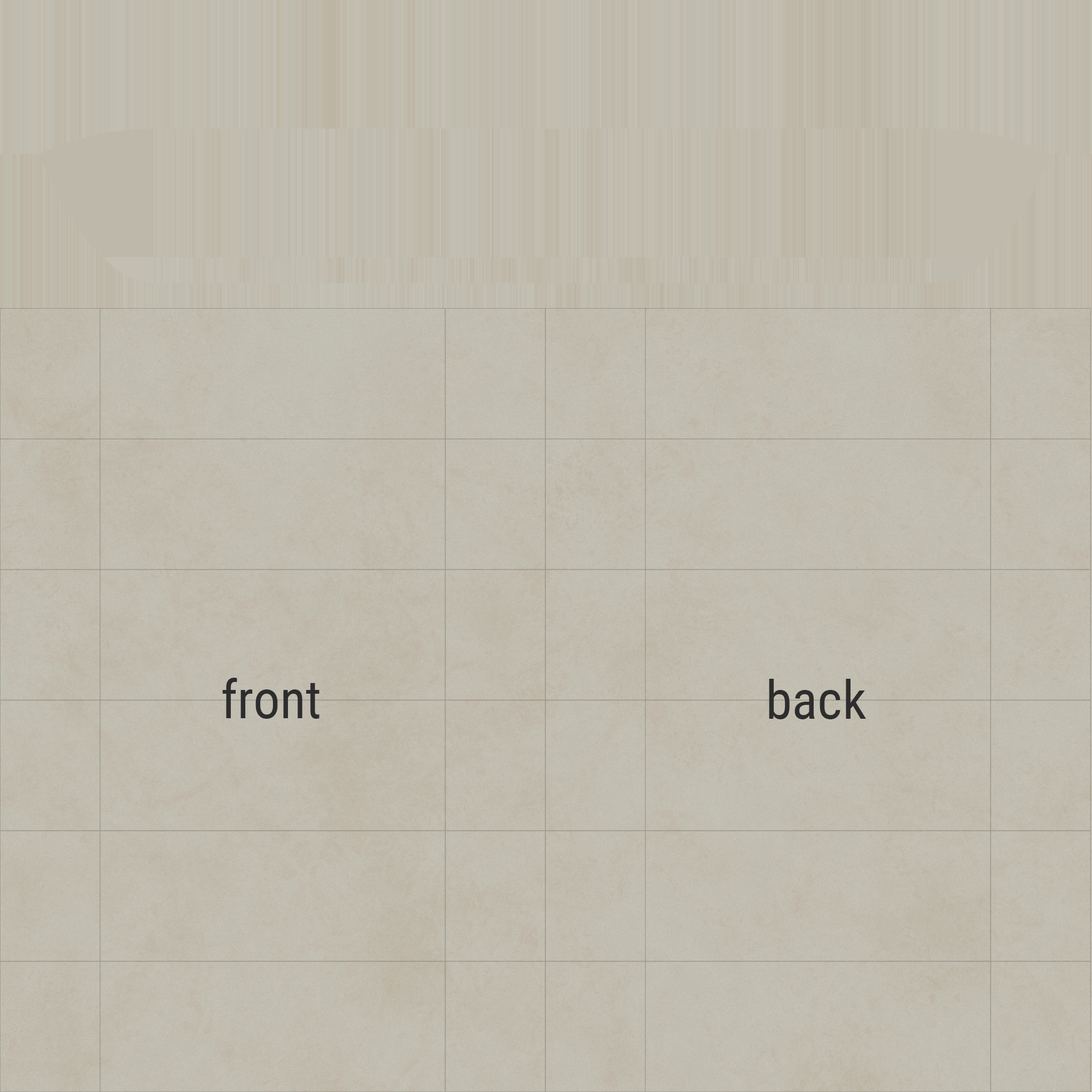
<style>
.page{position:relative;width:1092px;height:1092px}
.page>*{position:absolute;margin:0}
.t1{font:53.3px "RobotoCondensed-Regular";color:#2d2d2d}
</style>
<div class="page">
<p class="t1" style="left:222px;top:678px;width:97px;height:41px">front</p>
<p class="t1" style="left:769px;top:679px;width:97px;height:40px">back</p>
</div>
